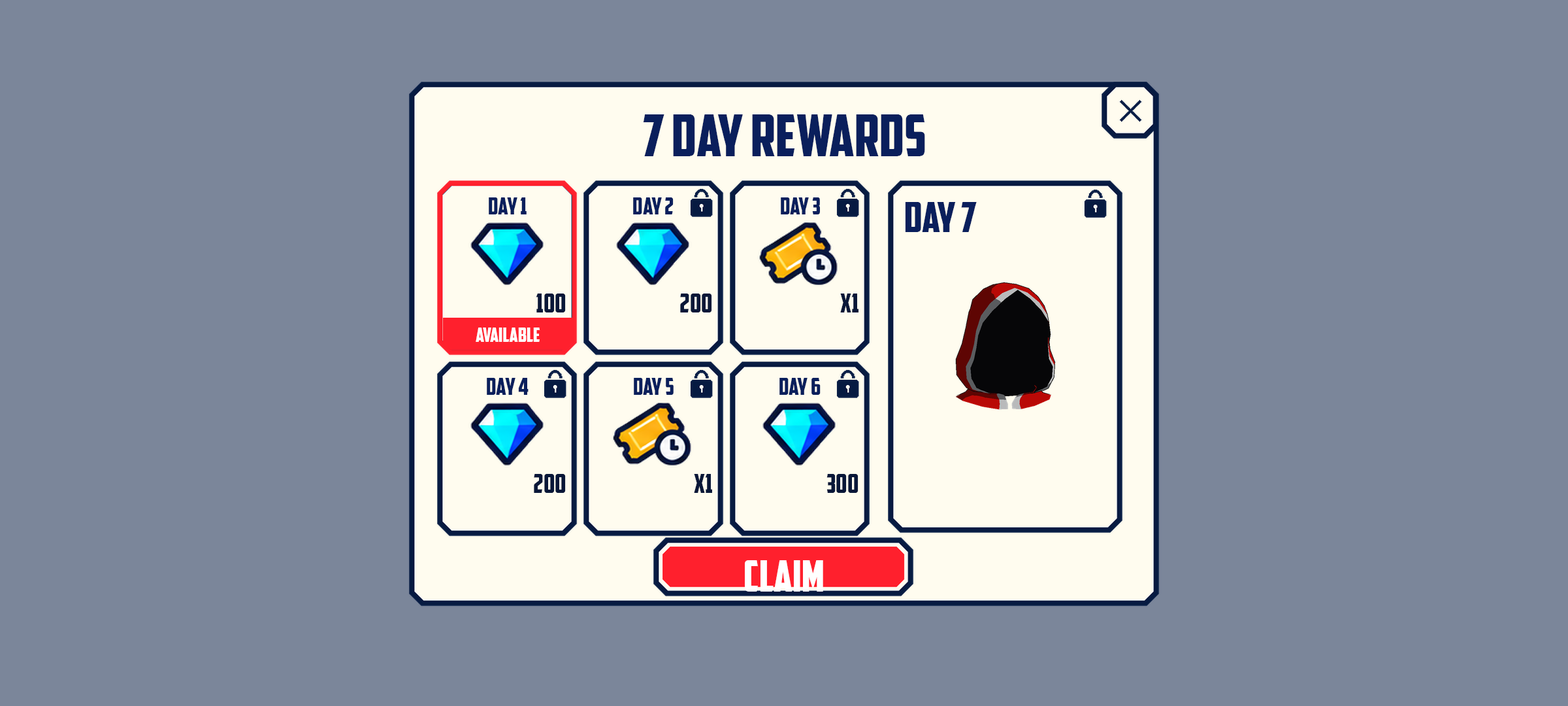
<style>
.page{position:relative;width:1568px;height:706px;background:#7b869a}
.page>*{position:absolute;margin:0}
.t1{font:57.5px "AmericanCaptain";color:#0a1f5c}
.t2{font:23.5px "AmericanCaptain";color:#0a1f5c}
.t3{font:41.8px "AmericanCaptain";color:#0a1f5c}
.t4{font:26.1px "AmericanCaptain";color:#091738}
.t5{font:19.6px "AmericanCaptain";color:#ffffff}
.t6{font:43.1px "AmericanCaptain";color:#ffffff}
</style>
<div class="page">
<p class="t1" style="left:643px;top:114px;width:282px;height:42px">7 DAY REWARDS</p>
<p class="t2" style="left:489px;top:197px;width:38px;height:17px">DAY 1</p>
<p class="t2" style="left:633px;top:197px;width:41px;height:17px">DAY 2</p>
<p class="t2" style="left:781px;top:197px;width:39px;height:17px">DAY 3</p>
<p class="t3" style="left:905px;top:202px;width:72px;height:30px">DAY 7</p>
<p class="t4" style="left:536px;top:293px;width:30px;height:19px">100</p>
<p class="t4" style="left:680px;top:293px;width:32px;height:19px">200</p>
<p class="t4" style="left:840px;top:293px;width:18px;height:19px">x1</p>
<p class="t5" style="left:476px;top:327px;width:64px;height:15px">AVAILABLE</p>
<p class="t2" style="left:487px;top:378px;width:42px;height:17px">DAY 4</p>
<p class="t2" style="left:634px;top:378px;width:40px;height:17px">DAY 5</p>
<p class="t2" style="left:779px;top:378px;width:42px;height:17px">DAY 6</p>
<p class="t4" style="left:534px;top:474px;width:32px;height:19px">200</p>
<p class="t4" style="left:694px;top:474px;width:18px;height:19px">x1</p>
<p class="t4" style="left:826px;top:474px;width:32px;height:19px">300</p>
<p class="t6" style="left:745px;top:560px;width:78px;height:31px">CLAIM</p>
</div>
